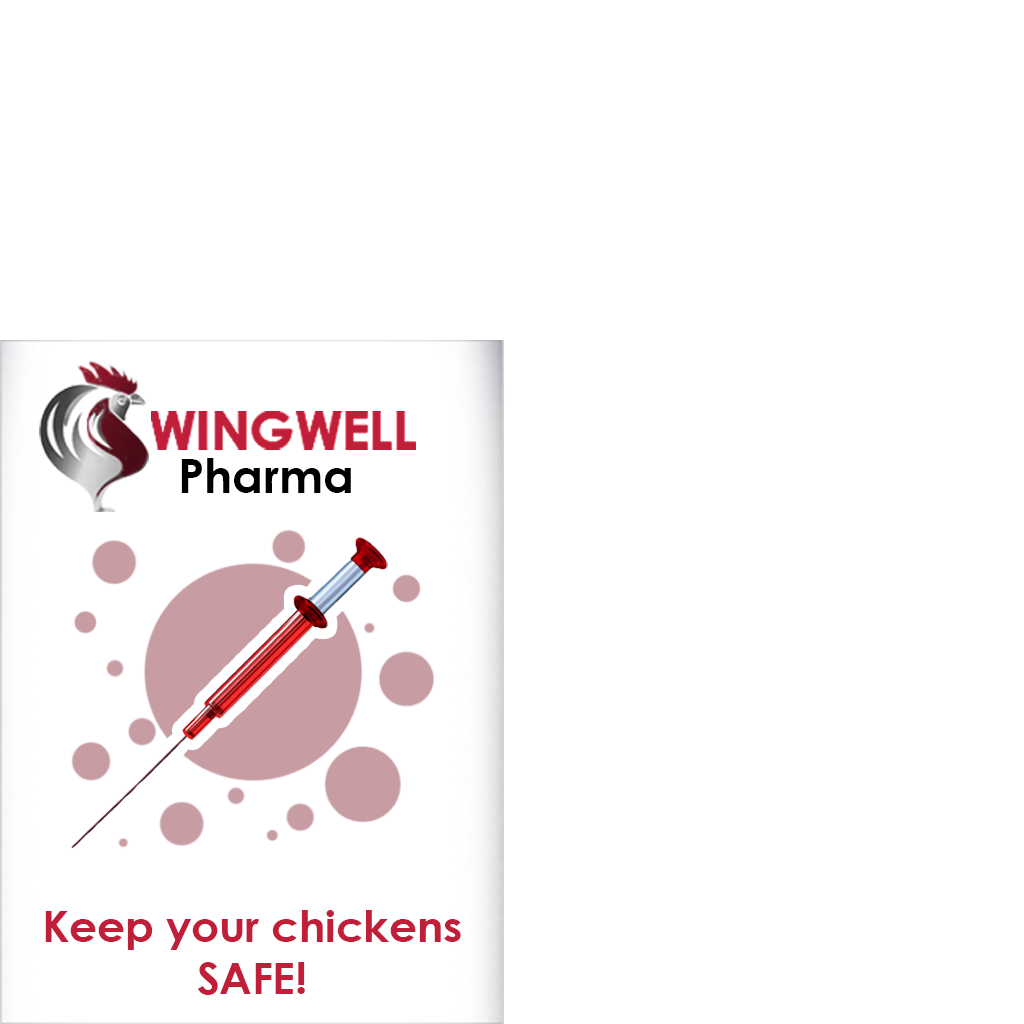
<style>
.page{position:relative;width:1024px;height:1024px;background:#ffffff}
.page>*{position:absolute;margin:0}
.t1{font:47.1px "CenturyGothic-Bold";color:#000000}
.t2{font:43.5px "CenturyGothic-Bold";color:#c01e39}
</style>
<div class="page">
<p class="t1" style="left:181px;top:458px;width:170px;height:35px">Pharma</p>
<p class="t2" style="left:45px;top:910px;width:416px;height:85px;text-align:center">Keep your chickens<br>SAFE!</p>
</div>
